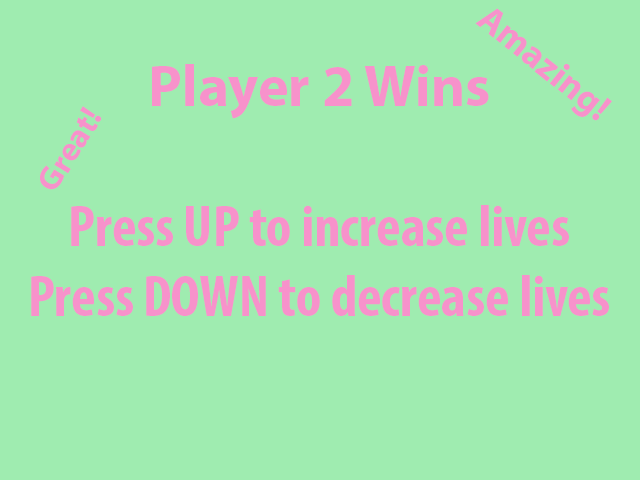
<style>
.page{position:relative;width:640px;height:480px;background:#9fecb0}
.page>*{position:absolute;margin:0}
.t1{font:37.5px "MyriadPro-Bold";color:#f792cb}
.t2{font:58.3px "MyriadPro-BoldCond";color:#f792cb}
.t3{font:58.3px "MyriadPro-Bold";color:#f792cb}
.t4{font:33px "MyriadPro-Bold";color:#f792cb}
</style>
<div class="page">
<p class="t1" style="left:475px;top:8px;width:137px;height:113px;rotate:39deg">Amazing!</p>
<p class="t2" style="left:31px;top:64px;width:578px;height:252px;text-align:center"><span class="t3">Player 2 Wins<br><br></span>Press UP to increase lives<br>Press DOWN to decrease lives</p>
<p class="t4" style="left:40px;top:106px;width:62px;height:84px;rotate:-58deg">Great!</p>
</div>
